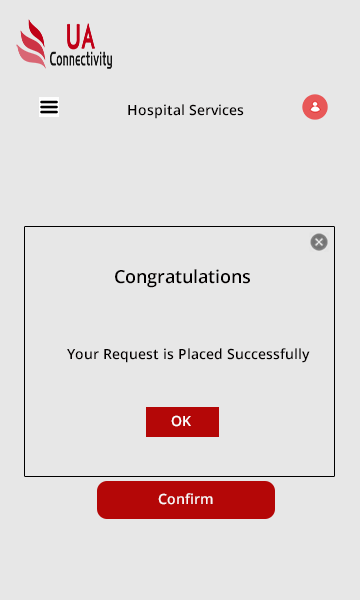
<style>
.page{position:relative;width:360px;height:600px;background:#e7e7e7}
.page>*{position:absolute;margin:0}
.t1{font:14px "OpenSans-Semibold";color:#030000}
.t2{font:18px "OpenSans-Semibold";color:#030000}
.t3{font:14px "OpenSans-Semibold";color:#ffffff}
.t4{font:14px "OpenSans-Semibold";color:#fbf7f7}
</style>
<div class="page">
<p class="t1" style="left:128px;top:104px;width:116px;height:15px">Hospital Services</p>
<p class="t2" style="left:115px;top:269px;width:135px;height:19px">Congratulations</p>
<p class="t1" style="left:67px;top:348px;width:243px;height:15px">Your Request is Placed Successfully</p>
<p class="t3" style="left:171px;top:415px;width:20px;height:12px"><span class="t1"><br>     </span>OK</p>
<p class="t4" style="left:158px;top:493px;width:55px;height:12px"><span class="t1"><br><br> </span>   Confirm</p>
</div>
